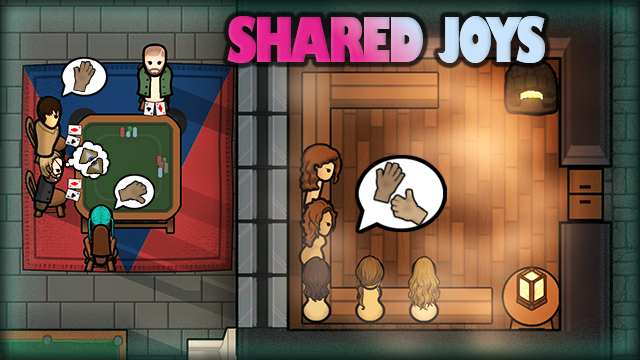
<style>
.page{position:relative;width:640px;height:360px}
.page>*{position:absolute;margin:0}
.t1{font:60px "GillSans-UltraBoldCondensed";letter-spacing:-0.05em}
</style>
<div class="page">
<p class="t1" style="left:227px;top:16px;width:318px;height:47px">SHARED JOYS</p>
</div>
